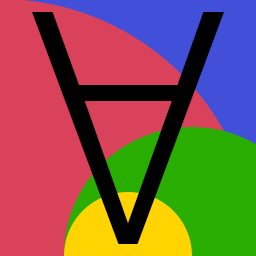
<style>
.page{position:relative;width:256px;height:256px;background:#d9425a}
.page>*{position:absolute;margin:0}
.t1{font:480px "THSarabunNew";color:#000000}
</style>
<div class="page">
<p class="t1" style="left:32px;top:12px;width:192px;height:232px;rotate:180deg">A</p>
</div>
